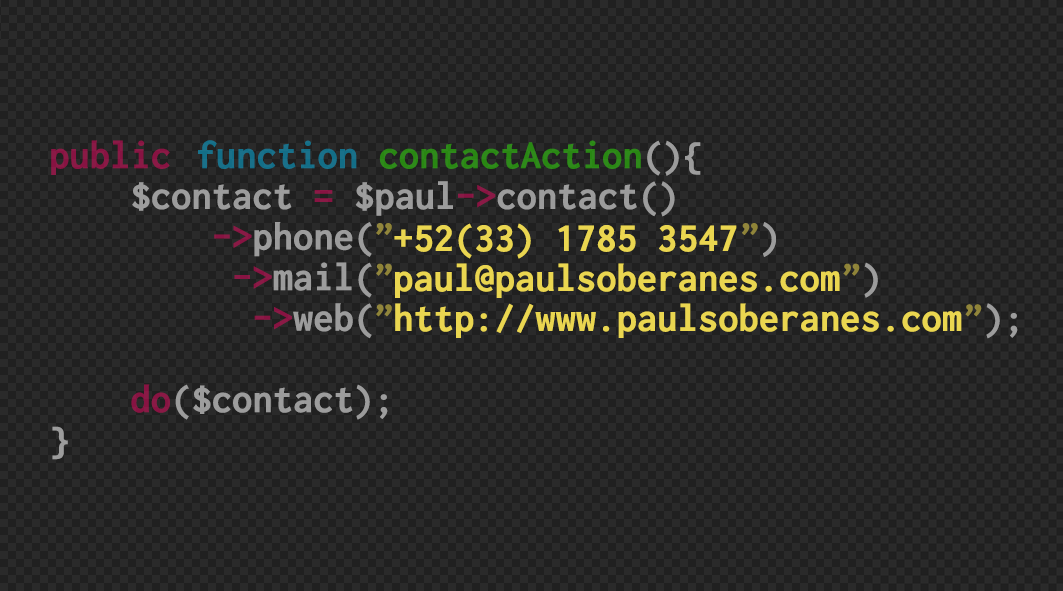
<style>
.page{position:relative;width:1063px;height:591px;background:#202020}
.page>*{position:absolute;margin:0}
.t1{font:40.6px/40.6px "Inconsolata-Bold"}
.t2{font:40.6px/20px "Inconsolata-Bold";color:#ead650}
</style>
<div class="page">
<p class="t1" style="left:51px;top:140px;width:967px;height:320px">public function contactAction(){<br> $contact = $paul-&gt;contact()<br>  -&gt;phone(”                 ”)<br>   -&gt;mail(”                      ”)<br>    -&gt;web(”                            ”);<br><br> do($contact);<br>}</p>
<p class="t2" style="left:394px;top:223px;width:568px;height:115px">+52(33) 1785 3547<br><br>paul@paulsoberanes.com<br><br>http://www.paulsoberanes.com</p>
</div>
